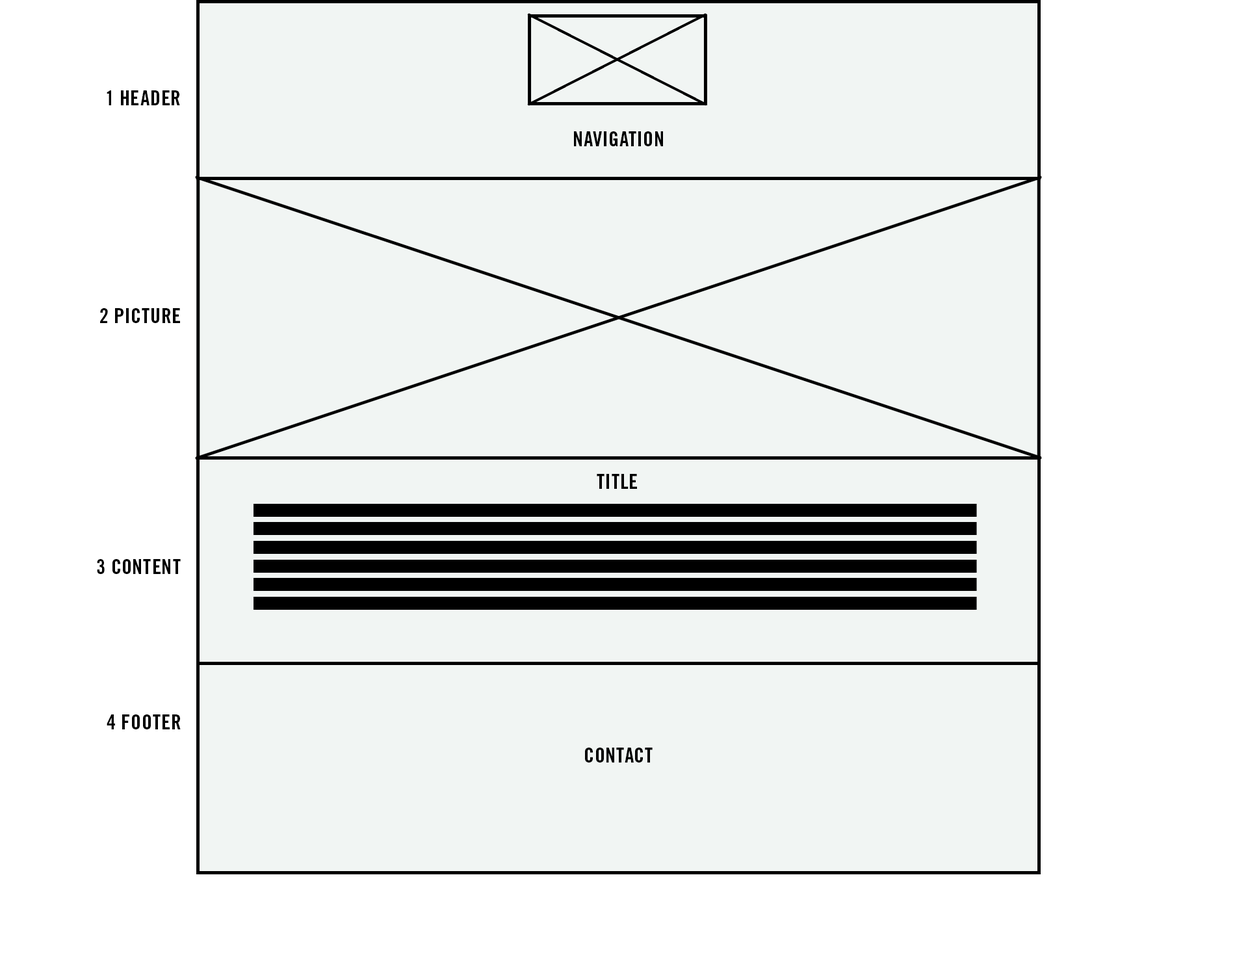
<style>
.page{position:relative;width:1235px;height:966px;background:#f1f5f3}
.page>*{position:absolute;margin:0}
.t1{font:20.8px "TradeGothic-BoldCondTwenty";letter-spacing:0.02em;color:#000000;text-transform:uppercase}
</style>
<div class="page">
<p class="t1" style="left:107px;top:90px;width:73px;height:15px">1 HEader</p>
<p class="t1" style="left:574px;top:131px;width:89px;height:15px">navigation</p>
<p class="t1" style="left:100px;top:308px;width:80px;height:15px">2 picture</p>
<p class="t1" style="left:597px;top:474px;width:40px;height:15px">title</p>
<p class="t1" style="left:97px;top:559px;width:84px;height:15px">3 content</p>
<p class="t1" style="left:107px;top:714px;width:74px;height:15px">4 footer</p>
<p class="t1" style="left:585px;top:747px;width:67px;height:15px">contact</p>
</div>
